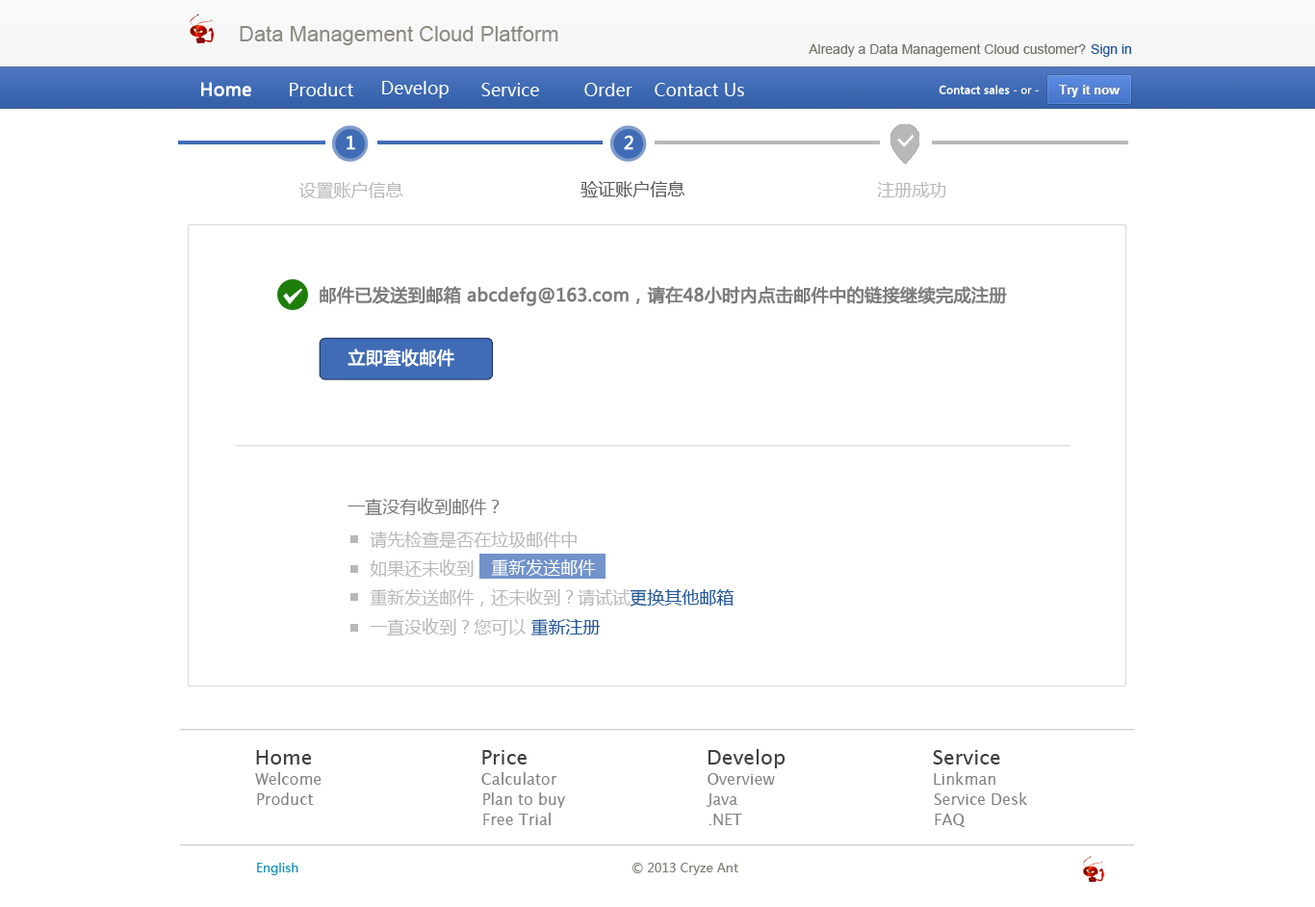
<style>
.page{position:relative;width:1315px;height:907px;background:#ffffff}
.page>*{position:absolute;margin:0}
.t1{font:21.2px "ArialMT";color:#8e8b82}
.t2{font:13.5px "ArialMT";color:#77746b}
.t3{font:13.5px "ArialMT";color:#225799}
.t4{font:17.3px "MicrosoftYaHei";color:#ffffff;font-weight:bold}
.t5{font:17.3px "MicrosoftYaHei";color:#ffffff}
.t6{font:10.6px "MicrosoftYaHei";color:#ffffff;font-weight:bold}
.t7{font:10.6px "MicrosoftYaHei";color:#ffffff}
.t8{font:17.3px "MicrosoftYaHei";color:#b9b8b8}
.t9{font:17.3px "MicrosoftYaHei";color:#585858}
.t10{font:17.3px "MicrosoftYaHei";color:#7c7c7c;font-weight:bold}
.t11{font:17.3px "MicrosoftYaHei";color:#787878}
.t12{font:17.3px "MicrosoftYaHei";color:#225799}
.t13{font:20.2px "LucidaSans";color:#404040}
.t14{font:20.2px "LucidaSans";color:#3f3f3f}
.t15{font:15.4px "LucidaSans";color:#818181}
.t16{font:12.5px "MicrosoftYaHei";color:#1791b8}
.t17{font:12.5px "MicrosoftYaHei";color:#827f74}
</style>
<div class="page">
<p class="t1" style="left:240px;top:26px;width:318px;height:19px">Data Management Cloud Platform</p>
<p class="t2" style="left:809px;top:43px;width:277px;height:14px">Already a Data Management Cloud customer?</p>
<p class="t3" style="left:1091px;top:44px;width:40px;height:13px">Sign in</p>
<p class="t4" style="left:201px;top:82px;width:50px;height:14px">Home</p>
<p class="t5" style="left:290px;top:83px;width:63px;height:13px">Product</p>
<p class="t5" style="left:382px;top:81px;width:67px;height:17px">Develop</p>
<p class="t5" style="left:481px;top:83px;width:58px;height:13px">Service</p>
<p class="t5" style="left:584px;top:83px;width:48px;height:13px">Order</p>
<p class="t5" style="left:655px;top:83px;width:89px;height:13px">Contact Us</p>
<p class="t6" style="left:939px;top:85px;width:100px;height:9px">Contact sales<span class="t7"> - or -</span></p>
<p class="t4" style="left:347px;top:135px;width:8px;height:15px">1</p>
<p class="t4" style="left:624px;top:135px;width:9px;height:15px">2</p>
<p class="t8" style="left:298px;top:182px;width:105px;height:16px">设置账户信息</p>
<p class="t9" style="left:580px;top:181px;width:104px;height:16px">验证账户信息</p>
<p class="t8" style="left:877px;top:182px;width:69px;height:15px">注册成功</p>
<p class="t10" style="left:320px;top:286px;width:687px;height:20px">邮件已发送到邮箱 abcdefg@163.com，请在48小时内点击邮件中的链接继续完成注册</p>
<p class="t4" style="left:348px;top:348px;width:106px;height:19px">立即查收邮件</p>
<p class="t11" style="left:348px;top:498px;width:152px;height:17px">一直没有收到邮件？</p>
<p class="t8" style="left:370px;top:530px;width:207px;height:19px">请先检查是否在垃圾邮件中</p>
<p class="t8" style="left:370px;top:559px;width:104px;height:18px">如果还未收到</p>
<p class="t5" style="left:491px;top:559px;width:105px;height:17px">重新发送邮件</p>
<p class="t8" style="left:370px;top:588px;width:364px;height:18px">重新发送邮件，还未收到？请试试<span class="t12">更换其他邮箱</span></p>
<p class="t8" style="left:370px;top:618px;width:231px;height:17px">一直没收到？您可以 <span class="t12">重新注册</span></p>
<p class="t13" style="left:256px;top:750px;width:56px;height:14px">Home</p>
<p class="t14" style="left:482px;top:750px;width:45px;height:14px">Price</p>
<p class="t13" style="left:708px;top:749px;width:78px;height:19px">Develop</p>
<p class="t14" style="left:933px;top:750px;width:67px;height:14px">Service</p>
<p class="t15" style="left:255px;top:772px;width:67px;height:13px">Welcome</p>
<p class="t15" style="left:481px;top:772px;width:76px;height:13px">Calculator</p>
<p class="t15" style="left:708px;top:773px;width:67px;height:12px">Overview</p>
<p class="t15" style="left:934px;top:772px;width:61px;height:13px">Linkman</p>
<p class="t15" style="left:257px;top:792px;width:56px;height:13px">Product</p>
<p class="t15" style="left:483px;top:792px;width:82px;height:16px">Plan to buy</p>
<p class="t15" style="left:706px;top:793px;width:31px;height:14px">Java</p>
<p class="t15" style="left:934px;top:792px;width:93px;height:13px">Service Desk</p>
<p class="t15" style="left:483px;top:812px;width:68px;height:13px">Free Trial</p>
<p class="t15" style="left:709px;top:813px;width:33px;height:12px">.NET</p>
<p class="t15" style="left:935px;top:813px;width:31px;height:15px">FAQ</p>
<p class="t16" style="left:257px;top:863px;width:41px;height:12px">English</p>
<p class="t17" style="left:632px;top:863px;width:106px;height:12px">© 2013 Cryze Ant</p>
</div>
